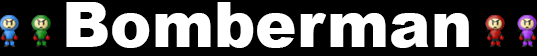
<style>
.page{position:relative;width:537px;height:56px;background:#000000}
.page>*{position:absolute;margin:0}
.t1{font:62.7px "Arial-Black";color:#ffffff}
</style>
<div class="page">
<p class="t1" style="left:66px;top:2px;width:403px;height:46px">Bomberman</p>
</div>
